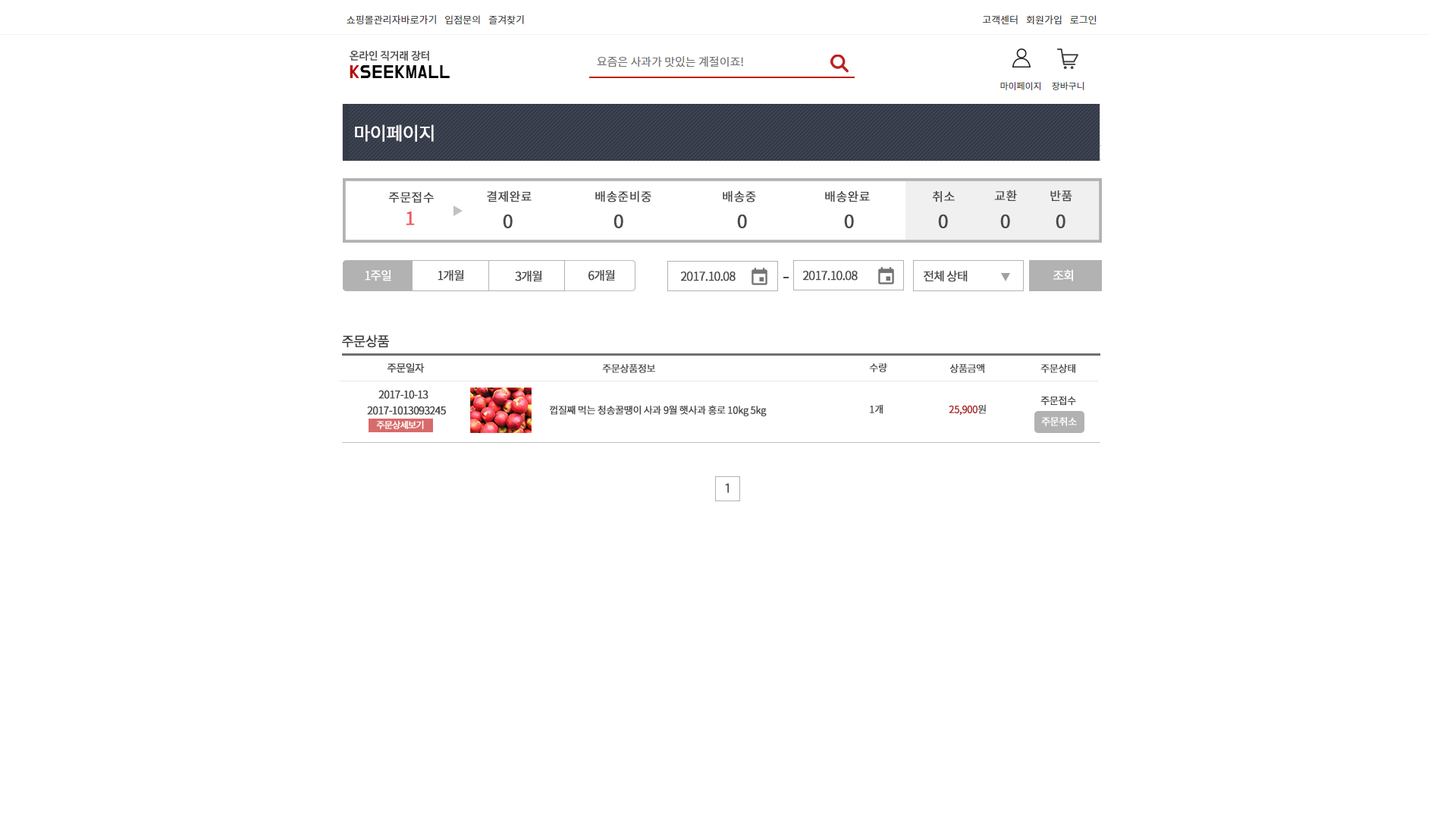
<style>
.page{position:relative;width:1456px;height:819px;background:#ffffff}
.page>*{position:absolute;margin:0}
.t1{font:18.2px "NotoSansCJKkr-Regular";letter-spacing:-0.05em;color:#ffffff;font-weight:bold}
.t2{font:12.1px "NotoSansCJKkr-Regular";color:#494949;font-weight:bold}
.t3{font:18.2px "NotoSansCJKkr-Regular";color:#f15c5c;font-weight:bold}
.t4{font:18.2px "NotoSansCJKkr-Regular";color:#494949;font-weight:bold}
.t5{font:12.1px "NotoSansCJKkr-Regular";letter-spacing:-0.075em;color:#ffffff;font-weight:bold}
.t6{font:12.1px "NotoSansCJKkr-Regular";letter-spacing:-0.075em;color:#494949;font-weight:bold}
.t7{font:13.6px "NotoSansCJKkr-Regular";letter-spacing:-0.075em;color:#373737;font-weight:bold}
.t8{font:10.6px "NotoSansCJKkr-Regular";letter-spacing:-0.075em;color:#484848;font-weight:bold}
.t9{font:9.9px "NotoSansCJKkr-Regular";letter-spacing:-0.05em;color:#484848;font-weight:bold}
.t10{font:9.9px "NotoSansCJKkr-Regular";letter-spacing:-0.05em;color:#ab2020;font-weight:bold}
.t11{font:9.1px "NotoSansCJKkr-Regular";letter-spacing:-0.075em;color:#ffffff;font-weight:bold}
.t12{font:9.9px "NotoSansCJKkr-Regular";letter-spacing:-0.05em;color:#ffffff;font-weight:bold}
.t13{font:12.1px "NanumBarunGothic";color:#494949;font-weight:bold}
</style>
<div class="page">
<p class="t1" style="left:355px;top:124px;width:79px;height:18px">마이페이지</p>
<p class="t2" style="left:388px;top:192px;width:46px;height:11px">주문접수</p>
<p class="t2" style="left:487px;top:190px;width:45px;height:12px">결제완료</p>
<p class="t2" style="left:595px;top:190px;width:56px;height:12px">배송준비중</p>
<p class="t2" style="left:723px;top:190px;width:33px;height:12px">배송중</p>
<p class="t2" style="left:825px;top:190px;width:45px;height:12px">배송완료</p>
<p class="t2" style="left:932px;top:191px;width:23px;height:11px">취소</p>
<p class="t2" style="left:994px;top:190px;width:23px;height:11px">교환</p>
<p class="t2" style="left:1050px;top:190px;width:22px;height:12px">반품</p>
<p class="t3" style="left:406px;top:212px;width:9px;height:13px">1</p>
<p class="t4" style="left:503px;top:214px;width:10px;height:14px">0</p>
<p class="t4" style="left:613px;top:214px;width:10px;height:14px">0</p>
<p class="t4" style="left:737px;top:214px;width:10px;height:14px">0</p>
<p class="t4" style="left:844px;top:214px;width:10px;height:14px">0</p>
<p class="t4" style="left:938px;top:214px;width:10px;height:14px">0</p>
<p class="t4" style="left:1000px;top:214px;width:10px;height:14px">0</p>
<p class="t4" style="left:1056px;top:214px;width:9px;height:14px">0</p>
<p class="t5" style="left:365px;top:270px;width:26px;height:11px">1주일</p>
<p class="t6" style="left:438px;top:270px;width:26px;height:11px">1개월</p>
<p class="t6" style="left:588px;top:270px;width:27px;height:11px">6개월</p>
<p class="t6" style="left:924px;top:270px;width:44px;height:12px">전체 상태</p>
<p class="t5" style="left:1053px;top:269px;width:20px;height:12px">조회</p>
<p class="t6" style="left:515px;top:271px;width:27px;height:11px">3개월</p>
<p class="t6" style="left:680px;top:271px;width:56px;height:10px">2017.10.08</p>
<p class="t6" style="left:802px;top:271px;width:56px;height:10px">2017.10.08</p>
<p class="t7" style="left:342px;top:334px;width:47px;height:13px">주문상품</p>
<p class="t8" style="left:387px;top:362px;width:38px;height:11px">주문일자</p>
<p class="t9" style="left:602px;top:364px;width:53px;height:9px">주문상품정보</p>
<p class="t9" style="left:869px;top:362px;width:18px;height:10px">수량</p>
<p class="t9" style="left:949px;top:363px;width:35px;height:10px">상품금액</p>
<p class="t9" style="left:1040px;top:364px;width:35px;height:9px">주문상태</p>
<p class="t8" style="left:378px;top:390px;width:50px;height:9px">2017-10-13</p>
<p class="t9" style="left:1040px;top:396px;width:36px;height:10px">주문접수</p>
<p class="t8" style="left:367px;top:406px;width:79px;height:9px">2017-1013093245</p>
<p class="t9" style="left:550px;top:405px;width:217px;height:11px">껍질째 먹는 청송꿀땡이 사과 9월 햇사과 홍로 10kg 5kg</p>
<p class="t9" style="left:870px;top:404px;width:13px;height:10px">1개</p>
<p class="t10" style="left:949px;top:404px;width:37px;height:12px">25,900<span class="t9">원</span></p>
<p class="t11" style="left:376px;top:420px;width:48px;height:9px">주문상세보기</p>
<p class="t12" style="left:1041px;top:417px;width:36px;height:9px">주문취소</p>
<p class="t13" style="left:725px;top:483px;width:4px;height:10px">1</p>
</div>
